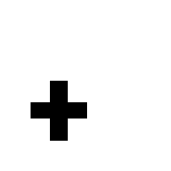
<style>
.page{position:relative;width:171px;height:171px;background:#ffffff}
.page>*{position:absolute;margin:0}
.t1{font:116px "Roboto-Black";color:#000000}
</style>
<div class="page">
<p class="t1" style="left:30px;top:80px;width:58px;height:61px">+</p>
</div>
